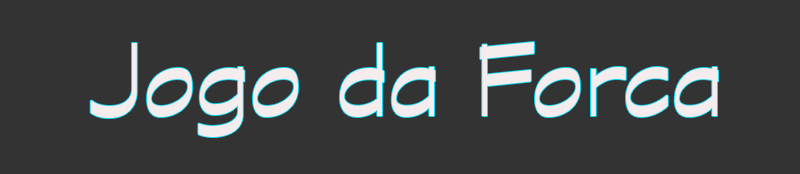
<style>
.page{position:relative;width:800px;height:174px;background:#333333}
.page>*{position:absolute;margin:0}
.t1{font:115.7px "GraphiteStd-Regular";color:#f5eded}
</style>
<div class="page">
<p class="t1" style="left:90px;top:42px;width:629px;height:95px">Jogo da Forca</p>
</div>
